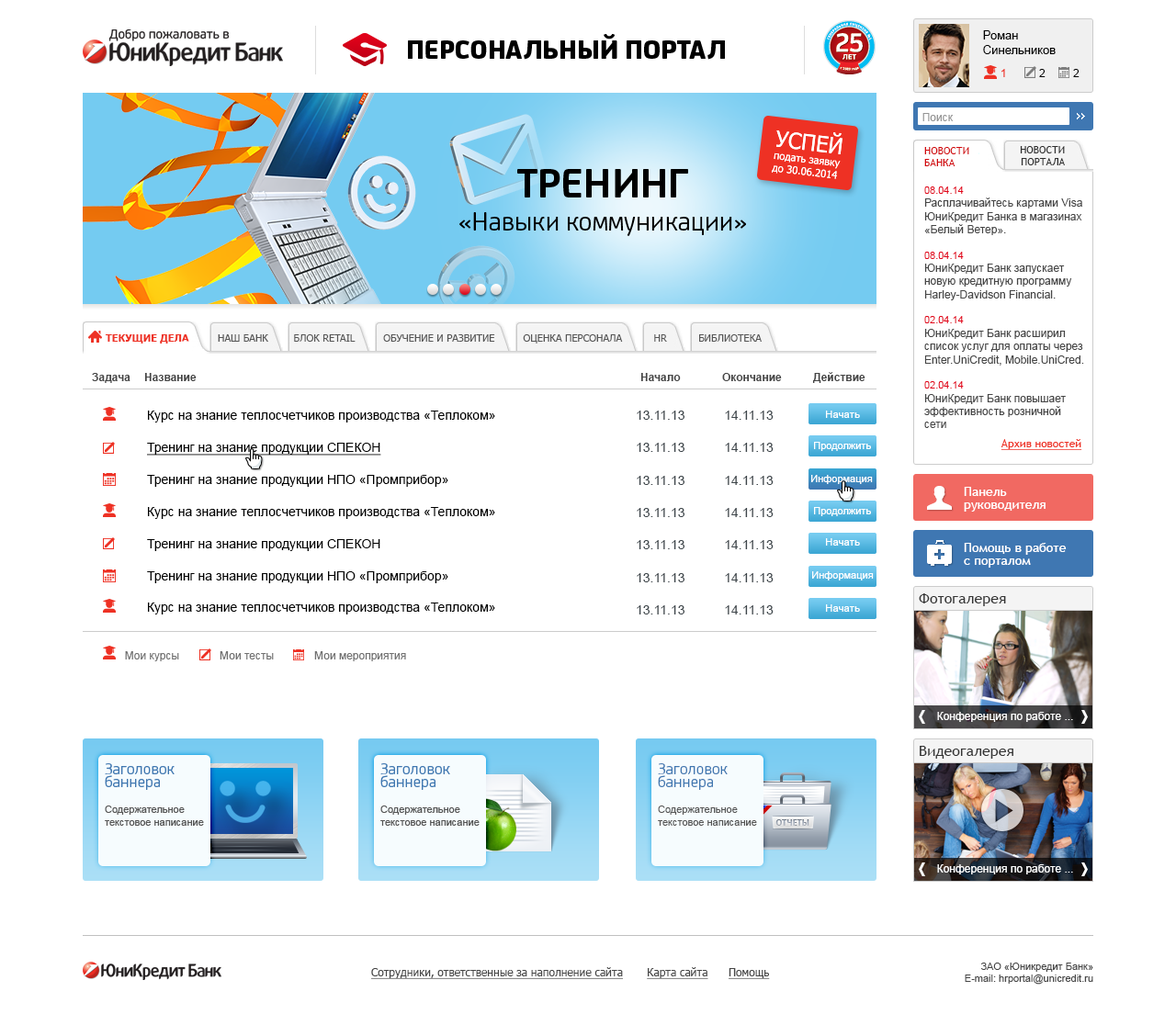
<style>
.page{position:relative;width:1176px;height:1014px;background:#ffffff}
.page>*{position:absolute;margin:0}
.t1{font:11.9px "ArialMT";color:#000000}
.t2{font:11px "ArialMT";color:#ee3124}
.t3{font:11px "ArialMT";color:#000000}
.t4{font:11px "ArialMT";color:#959595}
.t5{font:10.1px "TrebuchetMS";color:#d2080d;text-transform:uppercase}
.t6{font:10.1px "TrebuchetMS";color:#2e2e2e;text-transform:uppercase}
.t7{font:11px "ArialMT";color:#464646}
.t8{font:10.1px "ArialMT";color:#e2001a}
.t9{font:10.1px "Tahoma-Bold";color:#ee3124;text-transform:uppercase}
.t10{font:10.1px "Tahoma";color:#555555;text-transform:uppercase}
.t11{font:11px "Arial-BoldMT";color:#464646}
.t12{font:12.9px "ArialMT";color:#000000}
.t13{font:12.9px "ArialMT";color:#000000;text-decoration:underline}
.t14{font:12.9px "ArialMT";color:#3e464b}
.t15{font:10.1px "ArialMT";color:#ffffff}
.t16{font:11px "TrebuchetMS";color:#ee3124;text-decoration:underline}
.t17{font:12.9px/12.9px "TrebuchetMS";color:#ffffff}
.t18{font:14.7px "TrebuchetMS";color:#333333}
.t19{font:11px "ArialMT";color:#717171}
.t20{font:11px "ArialMT";color:#ffffff}
.t21{font:10.1px/12.9px "ArialMT";color:#555555}
.t22{font:16.5px/12.9px "UniCreditCY";color:#4077b0}
.t23{font:10.1px "ArialMT";color:#464646}
.t24{font:11px "Tahoma";color:#464646;text-decoration:underline}
</style>
<div class="page">
<p class="t1" style="left:983px;top:30px;width:72px;height:24px">Роман<br>Синельников</p>
<p class="t2" style="left:1001px;top:69px;width:4px;height:8px">1</p>
<p class="t3" style="left:1039px;top:69px;width:6px;height:8px">2</p>
<p class="t3" style="left:1073px;top:69px;width:6px;height:8px">2</p>
<p class="t4" style="left:922px;top:113px;width:32px;height:8px">Поиск</p>
<p class="t5" style="left:924px;top:147px;width:45px;height:19px">Новости<br>банка</p>
<p class="t6" style="left:1020px;top:146px;width:45px;height:19px;text-align:right">Новости<br>портала</p>
<p class="t7" style="left:924px;top:186px;width:160px;height:242px"><span class="t8">08.04.14<br></span>Расплачивайтесь картами Visa ЮниКредит Банка в магазинах «Белый Ветер».<br><br><span class="t8">08.04.14<br></span>ЮниКредит Банк запускает новую кредитную программу Harley-Davidson Financial.<br><br><span class="t8">02.04.14<br></span>ЮниКредит Банк расширил список услуг для оплаты через Enter.UniCredit, Mobile.UniCred.<br><br><span class="t8">02.04.14<br></span>ЮниКредит Банк повышает эффективность розничной сети</p>
<p class="t9" style="left:105px;top:334px;width:84px;height:10px">Текущие дела</p>
<p class="t10" style="left:218px;top:334px;width:544px;height:10px">Наш банк        БЛОК RETAIL         Обучение и развитие         Оценка персонала          HR          Библиотека</p>
<p class="t11" style="left:92px;top:373px;width:38px;height:10px">Задача</p>
<p class="t11" style="left:144px;top:373px;width:53px;height:8px">Название</p>
<p class="t11" style="left:640px;top:373px;width:41px;height:8px">Начало</p>
<p class="t11" style="left:722px;top:373px;width:60px;height:8px">Окончание</p>
<p class="t11" style="left:812px;top:372px;width:53px;height:11px">Действие</p>
<p class="t12" style="left:147px;top:411px;width:348px;height:204px">Курс на знание теплосчетчиков производства «Теплоком»<br><span class="t13">Тренинг на знание продукции СПЕКОН<br></span>Тренинг на знание продукции НПО «Промприбор»<br>Курс на знание теплосчетчиков производства «Теплоком»<br>Тренинг на знание продукции СПЕКОН<br>Тренинг на знание продукции НПО «Промприбор»<br>Курс на знание теплосчетчиков производства «Теплоком»<br>Тестирование на знание продукции СПЕКОН</p>
<p class="t14" style="left:637px;top:411px;width:136px;height:204px">13.11.13           14.11.13<br>13.11.13           14.11.13<br>13.11.13           14.11.13<br>13.11.13           14.11.13<br>13.11.13           14.11.13<br>13.11.13           14.11.13<br>13.11.13           14.11.13</p>
<p class="t15" style="left:826px;top:411px;width:34px;height:7px">Начать</p>
<p class="t15" style="left:814px;top:442px;width:57px;height:9px">Продолжить</p>
<p class="t16" style="left:1000px;top:439px;width:82px;height:11px">Архив новостей</p>
<p class="t15" style="left:811px;top:475px;width:62px;height:9px">Информация</p>
<p class="t17" style="left:964px;top:487px;width:81px;height:25px">Панель<br>руководителя</p>
<p class="t15" style="left:814px;top:507px;width:57px;height:9px">Продолжить</p>
<p class="t15" style="left:826px;top:538px;width:34px;height:8px">Начать</p>
<p class="t17" style="left:964px;top:543px;width:102px;height:25px">Помощь в работе<br>с порталом</p>
<p class="t15" style="left:812px;top:571px;width:62px;height:10px">Информация</p>
<p class="t18" style="left:919px;top:593px;width:87px;height:13px">Фотогалерея</p>
<p class="t15" style="left:826px;top:604px;width:34px;height:8px">Начать</p>
<p class="t19" style="left:125px;top:651px;width:54px;height:10px">Мои курсы</p>
<p class="t19" style="left:220px;top:651px;width:54px;height:9px">Мои тесты</p>
<p class="t19" style="left:314px;top:651px;width:92px;height:10px">Мои мероприятия</p>
<p class="t20" style="left:937px;top:712px;width:136px;height:10px">Конференция по работе ...</p>
<p class="t18" style="left:920px;top:746px;width:93px;height:13px">Видеогалерея</p>
<p class="t21" style="left:658px;top:763px;width:99px;height:63px"><span class="t22">Заголовок<br>баннера<br><br></span>Содержательное<br>текстовое написание</p>
<p class="t20" style="left:937px;top:864px;width:136px;height:11px">Конференция по работе ...</p>
<p class="t23" style="left:965px;top:963px;width:128px;height:22px;text-align:right">ЗАО «Юникредит Банк»<br>E-mail: hrportal@unicredit.ru</p>
<p class="t24" style="left:371px;top:967px;width:399px;height:12px">Сотрудники, ответственные за наполнение сайта       Карта сайта      Помощь</p>
</div>
